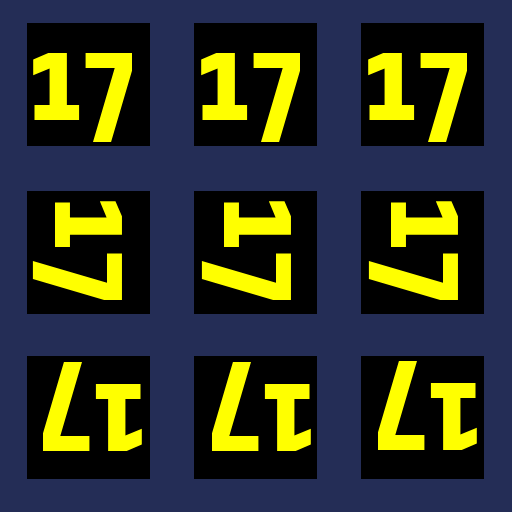
<style>
.page{position:relative;width:512px;height:512px;background:#242d56}
.page>*{position:absolute;margin:0}
.t1{font:130px "Share-BoldOSF";color:#ffff00}
</style>
<div class="page">
<p class="t1" style="left:33px;top:53px;width:99px;height:90px">17</p>
<p class="t1" style="left:201px;top:53px;width:99px;height:90px">17</p>
<p class="t1" style="left:368px;top:53px;width:99px;height:90px">17</p>
<p class="t1" style="left:32px;top:201px;width:90px;height:100px;rotate:90deg">17</p>
<p class="t1" style="left:201px;top:201px;width:90px;height:100px;rotate:90deg">17</p>
<p class="t1" style="left:368px;top:201px;width:90px;height:100px;rotate:90deg">17</p>
<p class="t1" style="left:43px;top:361px;width:99px;height:90px;rotate:-180deg">17</p>
<p class="t1" style="left:212px;top:361px;width:99px;height:90px;rotate:-180deg">17</p>
<p class="t1" style="left:378px;top:360px;width:99px;height:90px;rotate:-180deg">17</p>
</div>
